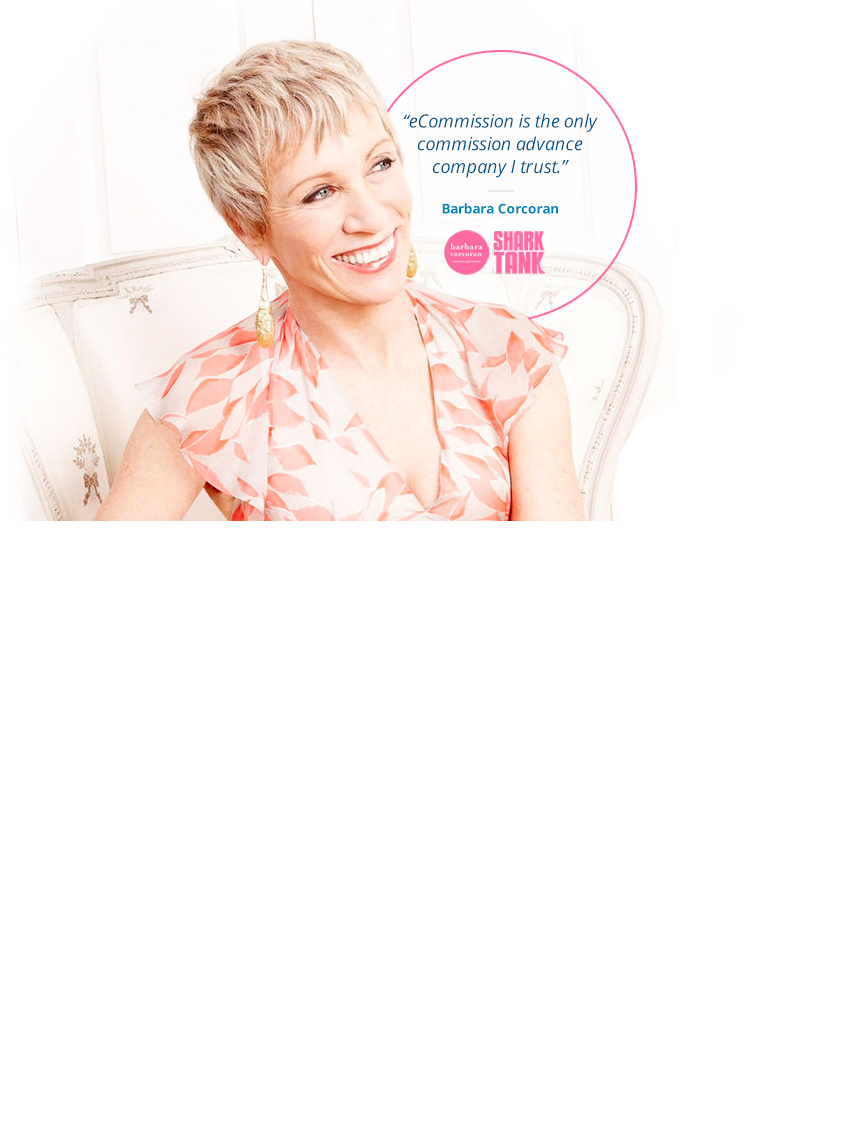
<style>
.page{position:relative;width:857px;height:1130px;background:#ffffff}
.page>*{position:absolute;margin:0}
.t1{font:18.1px/22.8px "OpenSans-Italic";color:#005488}
.t2{font:13.6px "OpenSans-Bold";color:#0085b2}
</style>
<div class="page">
<p class="t1" style="left:403px;top:113px;width:195px;height:65px;text-align:center">“eCommission is the only<br>commission advance<br>company I trust.”</p>
<p class="t2" style="left:442px;top:203px;width:116px;height:11px">Barbara Corcoran</p>
</div>
